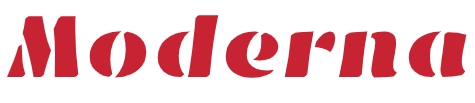
<style>
.page{position:relative;width:475px;height:103px;background:#ffffff}
.page>*{position:absolute;margin:0}
.t1{font:91.3px "EmblemaOne-Regular";color:#c82333}
</style>
<div class="page">
<p class="t1" style="left:7px;top:15px;width:460px;height:63px">Moderna</p>
</div>
